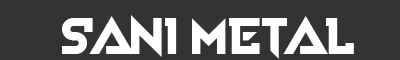
<style>
.page{position:relative;width:400px;height:60px;background:#333333}
.page>*{position:absolute;margin:0}
.t1{font:56.4px "VoiceInMyHead";color:#ffffff}
</style>
<div class="page">
<p class="t1" style="left:62px;top:15px;width:292px;height:44px">Sani Metal</p>
</div>
